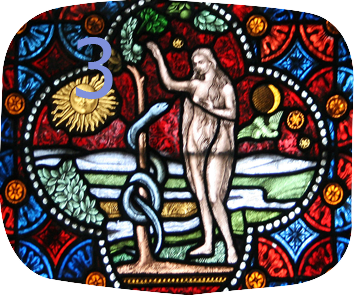
<style>
.page{position:relative;width:354px;height:295px}
.page>*{position:absolute;margin:0}
.t1{font:82.6px "Tahoma";color:#7f90db}
</style>
<div class="page">
<p class="t1" style="left:75px;top:37px;width:38px;height:62px">3</p>
</div>
